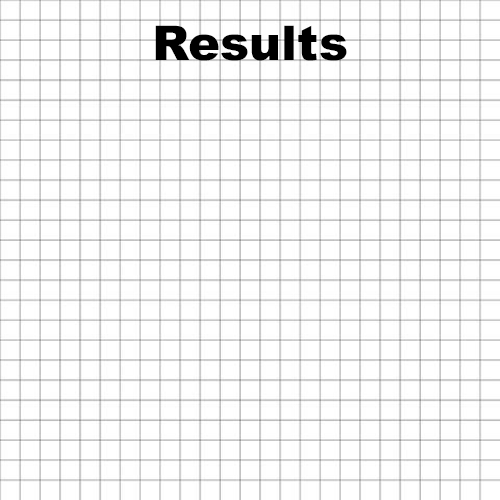
<style>
.page{position:relative;width:500px;height:500px;background:#ffffff}
.page>*{position:absolute;margin:0}
.t1{font:48.1px "Arial-Black";color:#000000}
</style>
<div class="page">
<p class="t1" style="left:155px;top:25px;width:192px;height:36px">Results</p>
</div>
